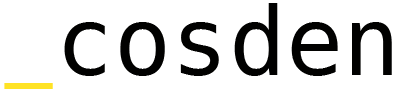
<style>
.page{position:relative;width:400px;height:89px;background:#ffffff}
.page>*{position:absolute;margin:0}
.t1{font:94.8px "Hack-Regular";color:#010100}
.t2{font:94.8px "Hack-Regular";color:#ffe326}
</style>
<div class="page">
<p class="t1" style="left:4px;top:3px;width:388px;height:86px"><span class="t2">_</span>cosden</p>
</div>
